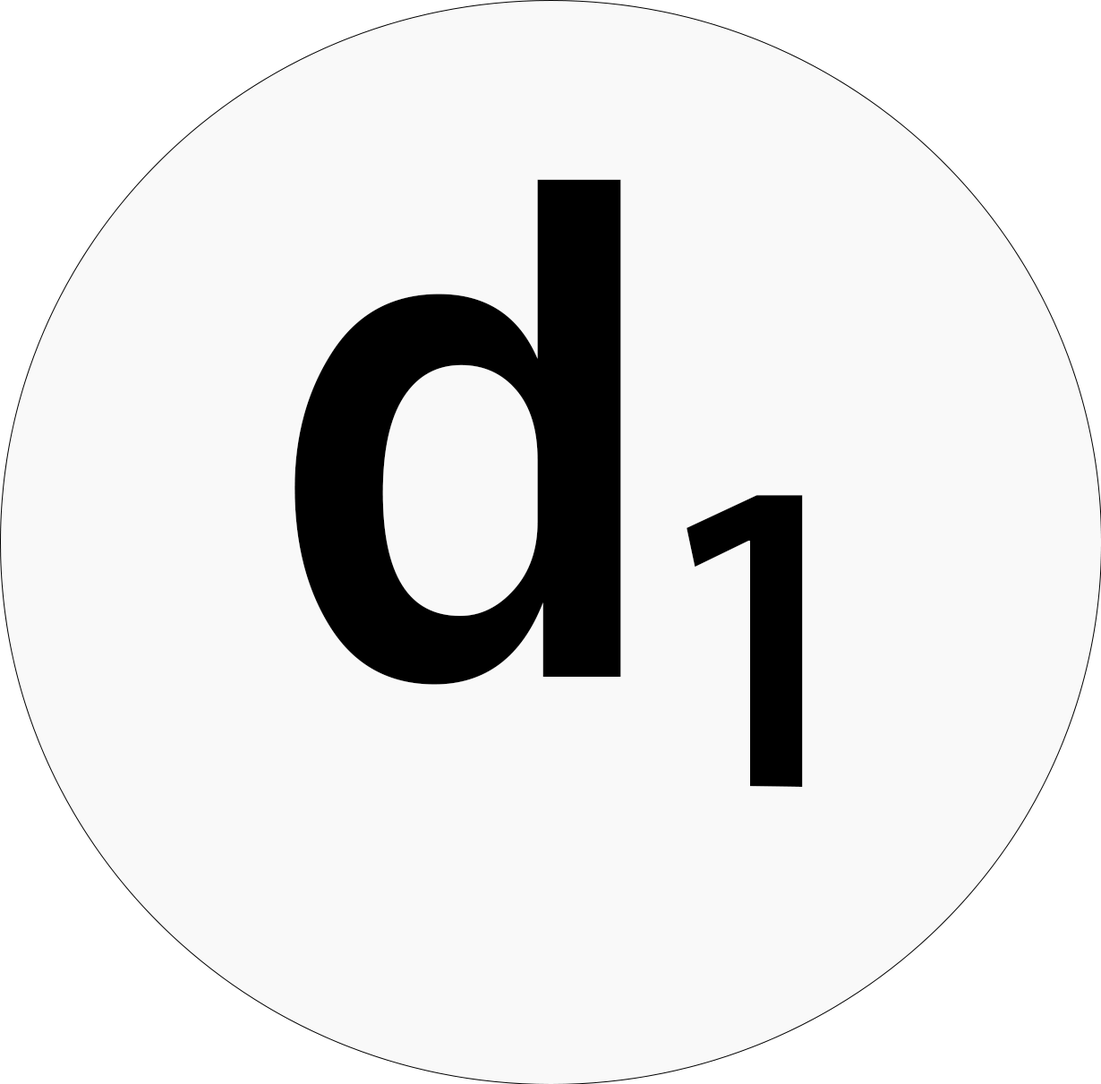
<style>
.page{position:relative;width:1101px;height:1084px;background:#f9f9f9}
.page>*{position:absolute;margin:0}
.t1{font:745.6px "FranklinGothic-Medium";color:#000000}
.t2{font:745.6px "MyriadPro-Regular";color:#000000}
</style>
<div class="page">
<p class="t1" style="left:294px;top:179px;width:509px;height:607px">d<span class="t2">₁</span></p>
</div>
